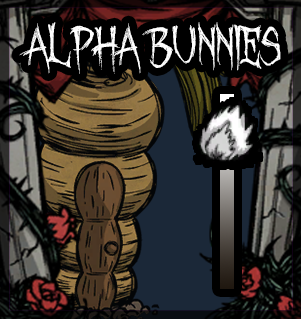
<style>
.page{position:relative;width:301px;height:319px}
.page>*{position:absolute;margin:0}
.t1{font:48px "OctoberCrow";color:#ffffff}
</style>
<div class="page">
<p class="t1" style="left:19px;top:22px;width:262px;height:52px">Alpha Bunnies</p>
</div>
